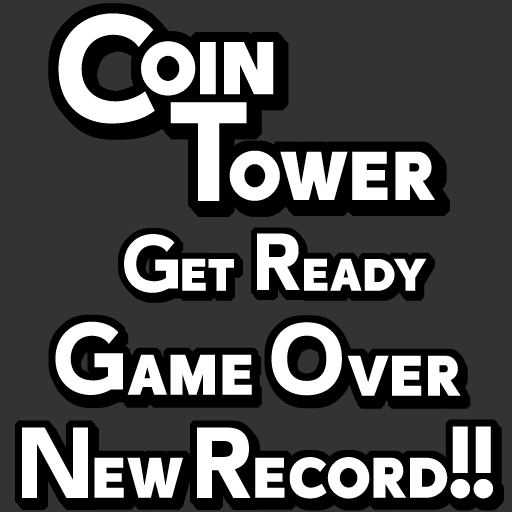
<style>
.page{position:relative;width:512px;height:512px;background:#333333}
.page>*{position:absolute;margin:0}
.t1{font:150px "Yapa-Regular";color:#ffffff}
.t2{font:130px "Yapa-Regular";color:#ffffff}
.t3{font:140px "Yapa-Regular";color:#ffffff}
.t4{font:120px "Yapa-Regular";color:#ffffff}
.t5{font:80px "Yapa-Regular";color:#ffffff}
.t6{font:100px "Yapa-Regular";color:#ffffff}
</style>
<div class="page">
<p class="t1" style="left:58px;top:13px;width:97px;height:111px">C</p>
<p class="t2" style="left:141px;top:41px;width:133px;height:55px">oin</p>
<p class="t3" style="left:170px;top:102px;width:77px;height:99px">T</p>
<p class="t4" style="left:229px;top:150px;width:206px;height:51px">ower</p>
<p class="t5" style="left:257px;top:233px;width:43px;height:57px">R</p>
<p class="t5" style="left:124px;top:234px;width:54px;height:59px">G</p>
<p class="t5" style="left:182px;top:258px;width:52px;height:33px">et</p>
<p class="t5" style="left:304px;top:258px;width:123px;height:33px">eady</p>
<p class="t6" style="left:55px;top:321px;width:68px;height:74px">G</p>
<p class="t6" style="left:271px;top:322px;width:71px;height:74px">O</p>
<p class="t6" style="left:127px;top:354px;width:125px;height:41px">ame</p>
<p class="t6" style="left:347px;top:355px;width:114px;height:41px">ver</p>
<p class="t6" style="left:22px;top:427px;width:66px;height:71px">N</p>
<p class="t6" style="left:197px;top:427px;width:54px;height:71px">R</p>
<p class="t6" style="left:450px;top:426px;width:20px;height:73px">!</p>
<p class="t6" style="left:473px;top:426px;width:20px;height:73px">!</p>
<p class="t6" style="left:94px;top:457px;width:89px;height:41px">ew</p>
<p class="t6" style="left:255px;top:457px;width:193px;height:42px">ecord</p>
</div>
